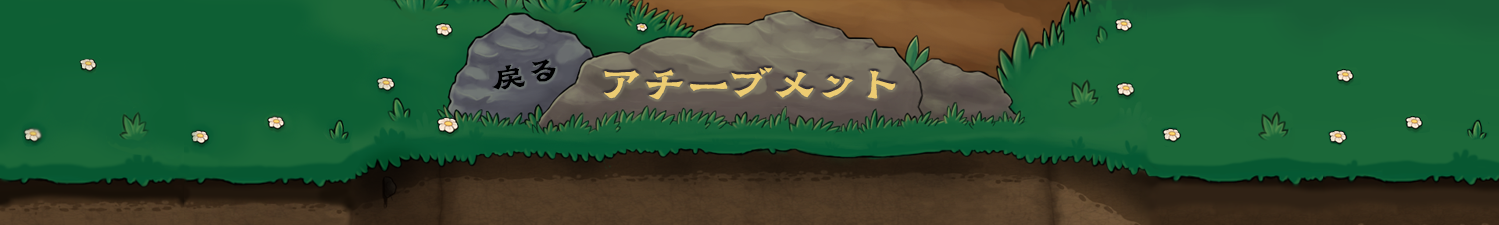
<style>
.page{position:relative;width:1499px;height:225px}
.page>*{position:absolute;margin:0}
.t1{font:31.6px "GraveBustedStoneLishuSCRoughlyC";color:#000000;scale:1.27 1}
.t2{font:40.8px "GraveBustedStoneLishuSCRoughlyC";color:#edcc72;scale:1.18 1}
</style>
<div class="page">
<p class="t1" style="left:492px;top:59px;width:64px;height:31px;rotate:-9deg">戻る</p>
<p class="t2" style="left:604px;top:67px;width:292px;height:33px">アチーブメント</p>
</div>
